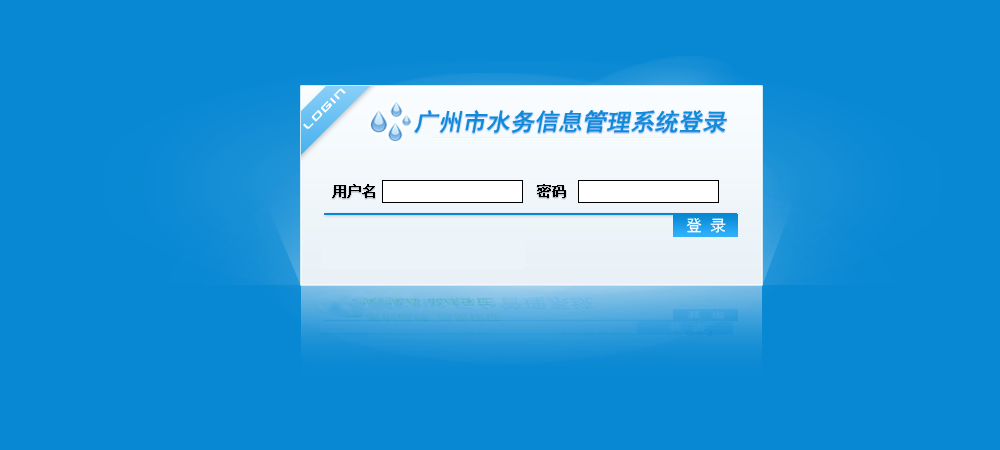
<style>
.page{position:relative;width:1000px;height:450px;background:#0888d3}
.page>*{position:absolute;margin:0}
.t1{font:24px "SimHei";color:#0e8bd4;font-style:italic}
.t2{font:14px "NSimSun";color:#000000;font-weight:bold}
</style>
<div class="page">
<p class="t1" style="left:414px;top:110px;width:313px;height:23px">广州市水务信息管理系统登录</p>
<p class="t2" style="left:332px;top:184px;width:234px;height:14px">用户名                    密码</p>
</div>
